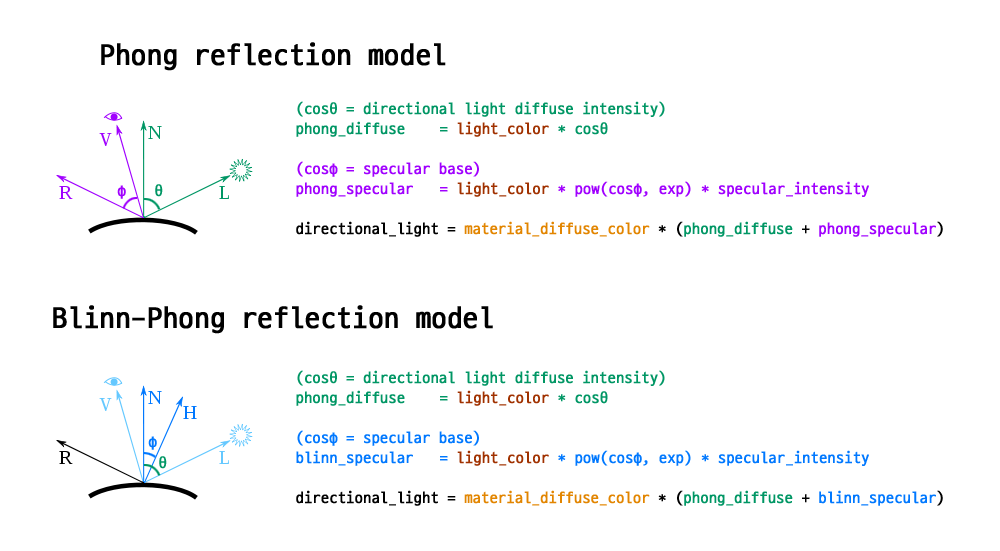
<style>
.page{position:relative;width:1000px;height:551px;background:#ffffff}
.page>*{position:absolute;margin:0}
.t1{font:30px "D2Coding";color:#000000;font-weight:bold}
.t2{font:16px/20px "D2Coding";color:#009664;font-weight:bold}
.t3{font:16px/20px "D2Coding";color:#a03100;font-weight:bold}
.t4{font:16px/20px "D2Coding";color:#a000ff;font-weight:bold}
.t5{font:16px/20px "D2Coding";color:#000000;font-weight:bold}
.t6{font:16px/20px "D2Coding";color:#e28500;font-weight:bold}
.t7{font:16px "D2Coding";color:#a000ff;font-weight:bold}
.t8{font:16px "D2Coding";color:#009664;font-weight:bold}
.t9{font:16px/20px "D2Coding";color:#0078ff;font-weight:bold}
.t10{font:16px "D2Coding";color:#0078ff;font-weight:bold}
</style>
<div class="page">
<p class="t1" style="left:101px;top:42px;width:345px;height:29px">Phong reflection model</p>
<p class="t2" style="left:296px;top:101px;width:647px;height:136px">(cosθ = directional light diffuse intensity)<br>phong_diffuse = <span class="t3">light_color</span> * cosθ<br><br><span class="t4">(cosφ = specular base)<br>phong_specular = </span><span class="t3">light_color </span><span class="t4">* pow(cosφ, exp) * specular_intensity<br><br></span><span class="t5">directional_light = </span><span class="t6">material_diffuse_color</span><span class="t5"> * (</span>phong_diffuse <span class="t5">+ </span><span class="t4">phong_specular</span><span class="t5">)</span></p>
<p class="t7" style="left:117px;top:185px;width:9px;height:14px">φ</p>
<p class="t8" style="left:155px;top:184px;width:8px;height:13px">θ</p>
<p class="t1" style="left:53px;top:305px;width:440px;height:29px">Blinn-Phong reflection model</p>
<p class="t2" style="left:296px;top:370px;width:647px;height:136px">(cosθ = directional light diffuse intensity)<br>phong_diffuse = <span class="t3">light_color</span> * cosθ<br><br><span class="t9">(cosφ = specular base)<br>blinn_specular = </span><span class="t3">light_color</span><span class="t9"> * pow(cosφ, exp) * specular_intensity<br><br></span><span class="t5">directional_light = </span><span class="t6">material_diffuse_color</span><span class="t5"> * (</span>phong_diffuse <span class="t5">+ </span><span class="t9">blinn_specular</span><span class="t5">)</span></p>
<p class="t10" style="left:148px;top:436px;width:9px;height:14px">φ</p>
<p class="t8" style="left:159px;top:456px;width:8px;height:13px">θ</p>
</div>
